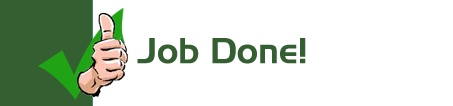
<style>
.page{position:relative;width:453px;height:106px;background:#ffffff}
.page>*{position:absolute;margin:0}
.t1{font:36px "Slicker";color:#345f30}
</style>
<div class="page">
<p class="t1" style="left:137px;top:38px;width:169px;height:26px">Job Done!</p>
</div>
